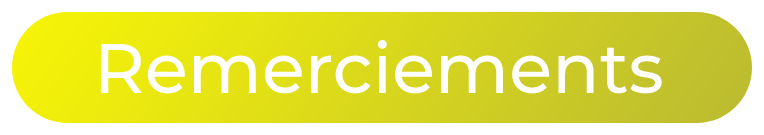
<style>
.page{position:relative;width:764px;height:135px;background:#ffffff}
.page>*{position:absolute;margin:0}
.t1{font:70px "Montserrat-Medium";color:#ffffff}
</style>
<div class="page">
<p class="t1" style="left:101px;top:40px;width:561px;height:54px">Remerciements</p>
</div>
